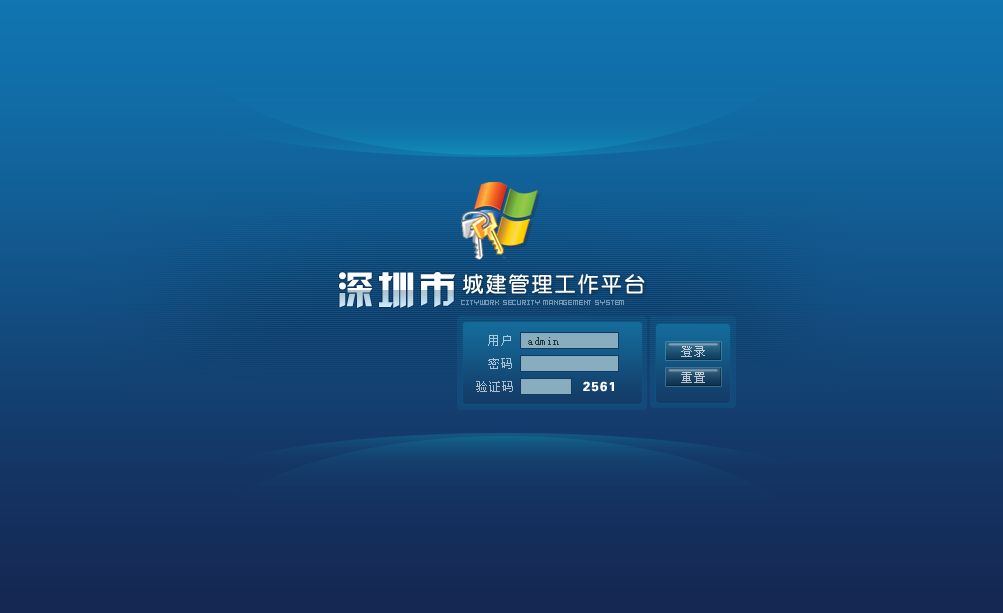
<style>
.page{position:relative;width:1003px;height:613px}
.page>*{position:absolute;margin:0}
.t1{font:38.3px "HYk2gj";letter-spacing:0.075em}
.t2{font:21px "FZY3JW--GB1-0";letter-spacing:0.1em;color:#ffffff}
.t3{font:7.6px "SG08";letter-spacing:0.01em;color:#7690a6}
.t4{font:12px "SimSun";letter-spacing:0.1em;color:#adc9d9}
.t5{font:12px "SimSun";letter-spacing:0.05em;color:#283439}
.t6{font:12px "SimSun";letter-spacing:0.1em;color:#becdd7}
.t7{font:12px "SimSun";letter-spacing:0.1em;color:#adc3d3}
.t8{font:12px "SimSun";letter-spacing:0.1em;color:#bec9d3}
.t9{font:12px "SimSun";letter-spacing:0.1em;color:#adbecd}
.t10{font:13px "FZH4FW--GB1-0";letter-spacing:0.1em;color:#ffffff}
</style>
<div class="page">
<p class="t1" style="left:339px;top:272px;width:116px;height:36px">深圳市</p>
<p class="t2" style="left:462px;top:273px;width:183px;height:22px">城建管理工作平台</p>
<p class="t3" style="left:461px;top:300px;width:163px;height:5px">CITYWORK SECURITY MANAGEMENT SYSTEM</p>
<p class="t4" style="left:488px;top:335px;width:23px;height:11px">用户</p>
<p class="t5" style="left:528px;top:337px;width:31px;height:8px">admin</p>
<p class="t6" style="left:681px;top:346px;width:24px;height:11px">登录</p>
<p class="t7" style="left:488px;top:358px;width:24px;height:11px">密码</p>
<p class="t8" style="left:681px;top:372px;width:24px;height:11px">重置</p>
<p class="t9" style="left:476px;top:381px;width:37px;height:11px">验证码</p>
<p class="t10" style="left:583px;top:381px;width:31px;height:11px">2561</p>
</div>
